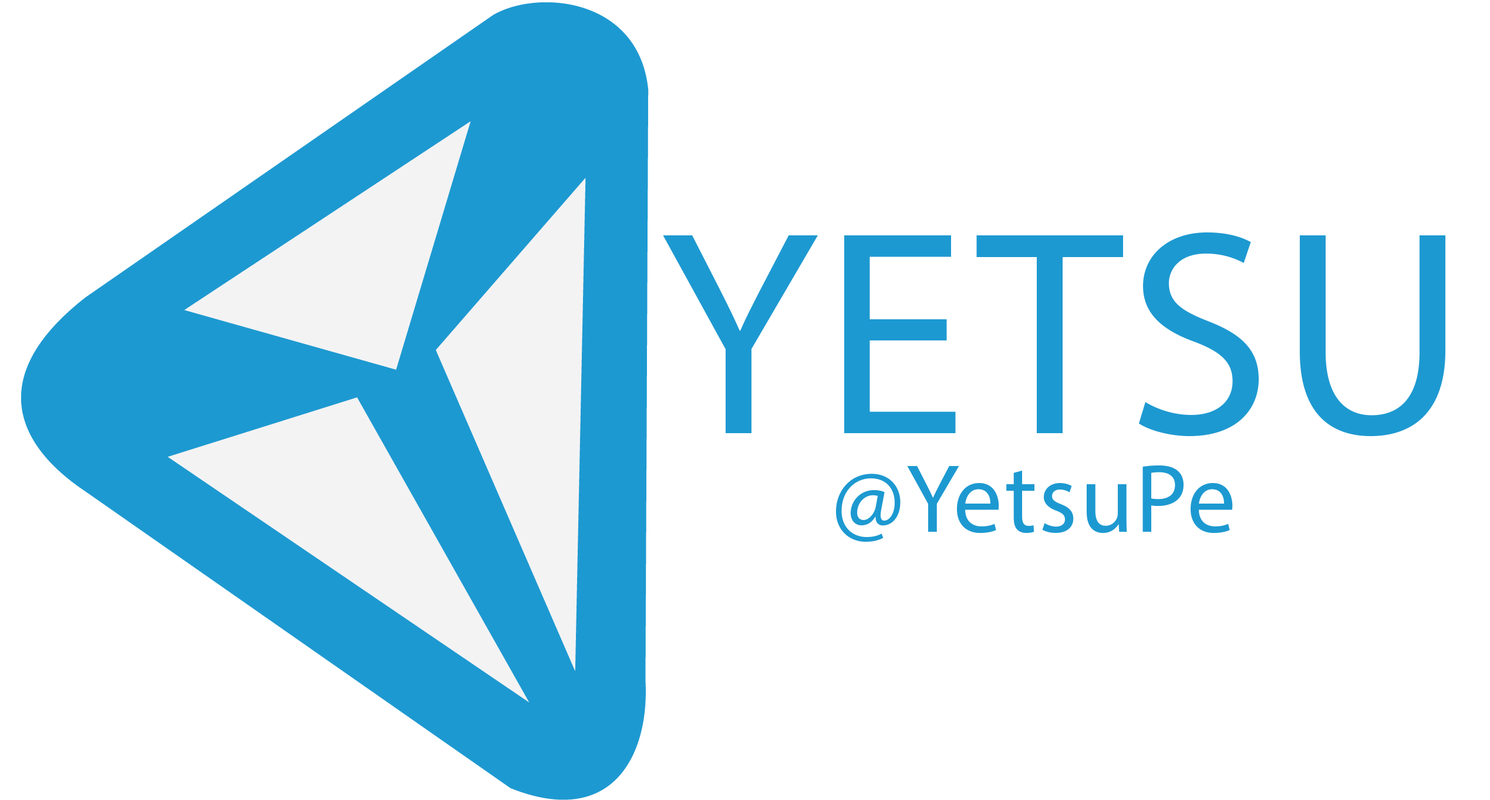
<style>
.page{position:relative;width:1490px;height:800px;background:#ffffff}
.page>*{position:absolute;margin:0}
.t1{font:293.6px "MyriadPro-Regular";letter-spacing:0.02em;color:#1d99d1}
.t2{font:97.9px "MyriadPro-Regular";letter-spacing:0.02em;color:#1d99d1}
</style>
<div class="page">
<p class="t1" style="left:663px;top:232px;width:782px;height:204px">YETSU</p>
<p class="t2" style="left:836px;top:466px;width:397px;height:76px">@YetsuPe</p>
</div>
